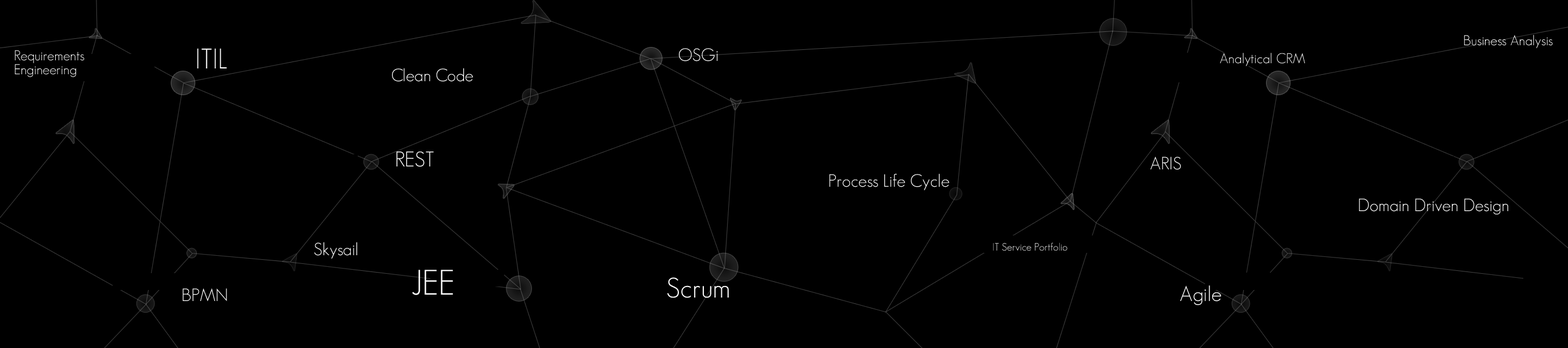
<style>
.page{position:relative;width:1568px;height:348px;background:#000000}
.page>*{position:absolute;margin:0}
.t1{font:13.9px "GeosansLight";color:#ffffff}
.t2{font:13.9px/13.9px "GeosansLight";color:#ffffff}
.t3{font:27.9px "GeosansLight";color:#ffffff}
.t4{font:17.4px "GeosansLight";color:#ffffff}
.t5{font:20.9px "GeosansLight";color:#ffffff}
.t6{font:10.5px "GeosansLight"}
.t7{font:34.8px "GeosansLight";color:#ffffff}
</style>
<div class="page">
<p class="t1" style="left:1464px;top:35px;width:89px;height:13px">Business Analysis</p>
<p class="t2" style="left:15px;top:50px;width:69px;height:27px">Requirements <br>Engineering</p>
<p class="t3" style="left:197px;top:48px;width:30px;height:21px">ITIL</p>
<p class="t4" style="left:679px;top:48px;width:39px;height:14px">OSGi</p>
<p class="t1" style="left:1220px;top:53px;width:85px;height:13px">Analytical CRM</p>
<p class="t4" style="left:392px;top:68px;width:81px;height:14px">Clean Code</p>
<p class="t5" style="left:396px;top:152px;width:38px;height:15px">REST</p>
<p class="t4" style="left:1150px;top:157px;width:31px;height:13px">ARIS</p>
<p class="t4" style="left:829px;top:174px;width:121px;height:16px">Process Life Cycle</p>
<p class="t4" style="left:1359px;top:199px;width:149px;height:16px">Domain Driven Design</p>
<p class="t4" style="left:314px;top:242px;width:43px;height:17px">Skysail</p>
<p class="t6" style="left:993px;top:243px;width:74px;height:8px">IT Service Portfolio</p>
<p class="t7" style="left:412px;top:270px;width:41px;height:26px">JEE</p>
<p class="t3" style="left:667px;top:278px;width:62px;height:21px">Scrum</p>
<p class="t4" style="left:182px;top:289px;width:45px;height:13px">BPMN</p>
<p class="t5" style="left:1180px;top:286px;width:41px;height:19px">Agile</p>
</div>
